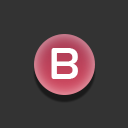
<style>
.page{position:relative;width:128px;height:128px;background:#333333}
.page>*{position:absolute;margin:0}
.t1{font:44.6px "NasalizationRg-Regular";color:#ffffff}
</style>
<div class="page">
<p class="t1" style="left:51px;top:48px;width:27px;height:31px">B</p>
</div>
